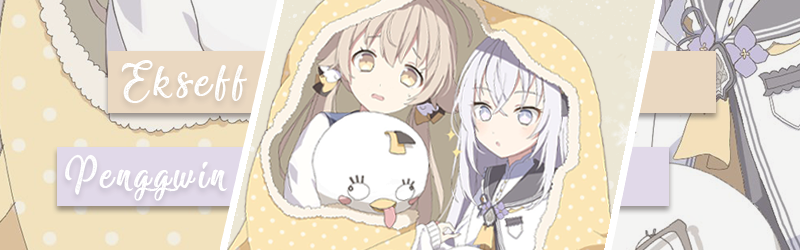
<style>
.page{position:relative;width:800px;height:250px}
.page>*{position:absolute;margin:0}
.t1{font:58.6px "Miraculous&Christmas";letter-spacing:0.1em;color:#ffffff}
.t2{font:53.8px "Miraculous&Christmas";letter-spacing:0.1em;color:#ffffff;scale:0.9 1}
</style>
<div class="page">
<p class="t1" style="left:121px;top:60px;width:126px;height:43px">Ekseff</p>
<p class="t2" style="left:65px;top:154px;width:163px;height:47px">Penggwin</p>
</div>
